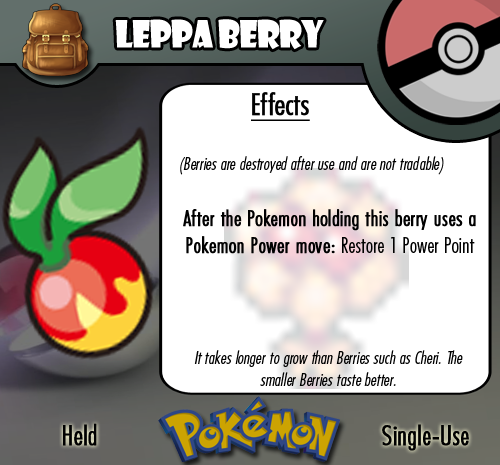
<style>
.page{position:relative;width:500px;height:465px;background:#ffffff}
.page>*{position:absolute;margin:0}
.t1{font:36.7px "ShowcardGothic-Reg";letter-spacing:-0.025em;color:#ffffff;scale:0.91 1}
.t2{font:22.2px "FuturaCondensedBQ-Light";color:#010101;font-weight:bold}
.t3{font:27.8px "FuturaCondensedBQ-Light";color:#010101;font-weight:bold}
.t4{font:30.6px "FuturaCondensedBQ-Light";color:#010101;font-weight:bold;text-decoration:underline}
.t5{font:18.1px "FuturaCondensedBQ-Light";color:#010101;font-style:italic}
.t6{font:22.2px "FuturaCondensedBQ-Light";color:#010101}
</style>
<div class="page">
<p class="t1" style="left:115px;top:19px;width:209px;height:31px">Leppa Berry</p>
<p class="t2" style="left:180px;top:92px;width:296px;height:162px"><span class="t3">  </span><span class="t4">Effects<br><br></span><span class="t5">(Berries are destroyed after use and are not tradable)<br><br><br><br></span>After the Pokemon holding this berry uses a Pokemon Power move: <span class="t6">Restore 1 Power Point</span></p>
<p class="t5" style="left:194px;top:350px;width:269px;height:36px;text-align:center">It takes longer to grow than Berries such as Cheri. The smaller Berries taste better.</p>
<p class="t3" style="left:63px;top:423px;width:34px;height:23px">Held</p>
<p class="t3" style="left:382px;top:424px;width:87px;height:27px">Single-Use</p>
</div>
